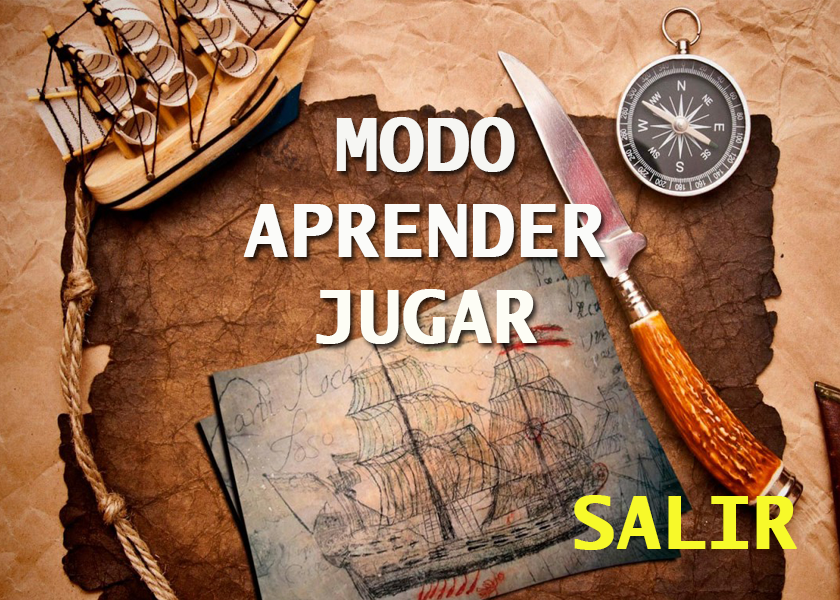
<style>
.page{position:relative;width:840px;height:600px}
.page>*{position:absolute;margin:0}
.t1{font:72px "LucidaSans-TypewriterBold";color:#fbfbf9;font-weight:bold}
.t2{font:72px "LucidaSans-TypewriterBold";color:#f6f6f3;font-weight:bold}
.t3{font:72px "LucidaSans-TypewriterBold";color:#fdfdf5;font-weight:bold}
.t4{font:72px "LucidaSans-TypewriterBold";color:#f7f92a;font-weight:bold}
</style>
<div class="page">
<p class="t1" style="left:243px;top:117px;width:362px;height:227px;text-align:center"><span class="t2">MODO<br></span>APRENDER<br><span class="t3">JUGAR</span></p>
<p class="t4" style="left:574px;top:495px;width:223px;height:55px">SALIR</p>
</div>
